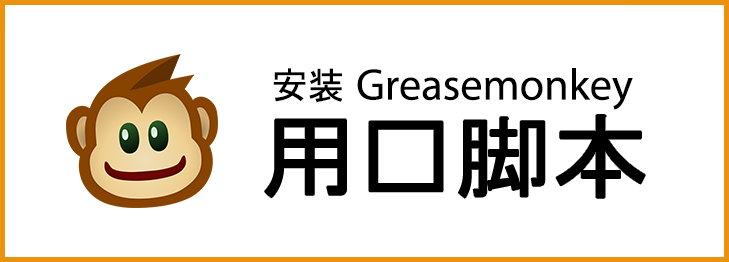
<style>
.page{position:relative;width:729px;height:262px;background:#ffffff}
.page>*{position:absolute;margin:0}
.t1{font:36.5px "MS-Gothic";color:#000000}
.t2{font:44.5px "MyriadPro-Regular";color:#000000}
.t3{font:92.9px "MS-Gothic";color:#000000;scale:1.05 1}
</style>
<div class="page">
<p class="t1" style="left:273px;top:68px;width:70px;height:35px">安装</p>
<p class="t2" style="left:357px;top:68px;width:276px;height:42px">Greasemonkey</p>
<p class="t3" style="left:265px;top:115px;width:380px;height:83px">用户脚本</p>
</div>
